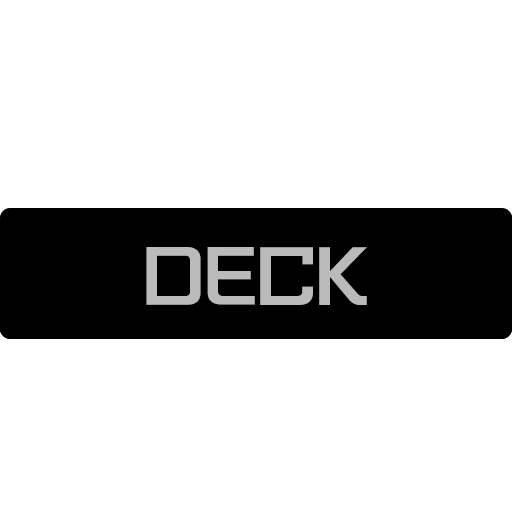
<style>
.page{position:relative;width:512px;height:512px;background:#ffffff}
.page>*{position:absolute;margin:0}
.t1{font:66.1px "KafuTechnoStd-HV";color:#bababa}
</style>
<div class="page">
<p class="t1" style="left:146px;top:247px;width:221px;height:58px">DECK</p>
</div>
